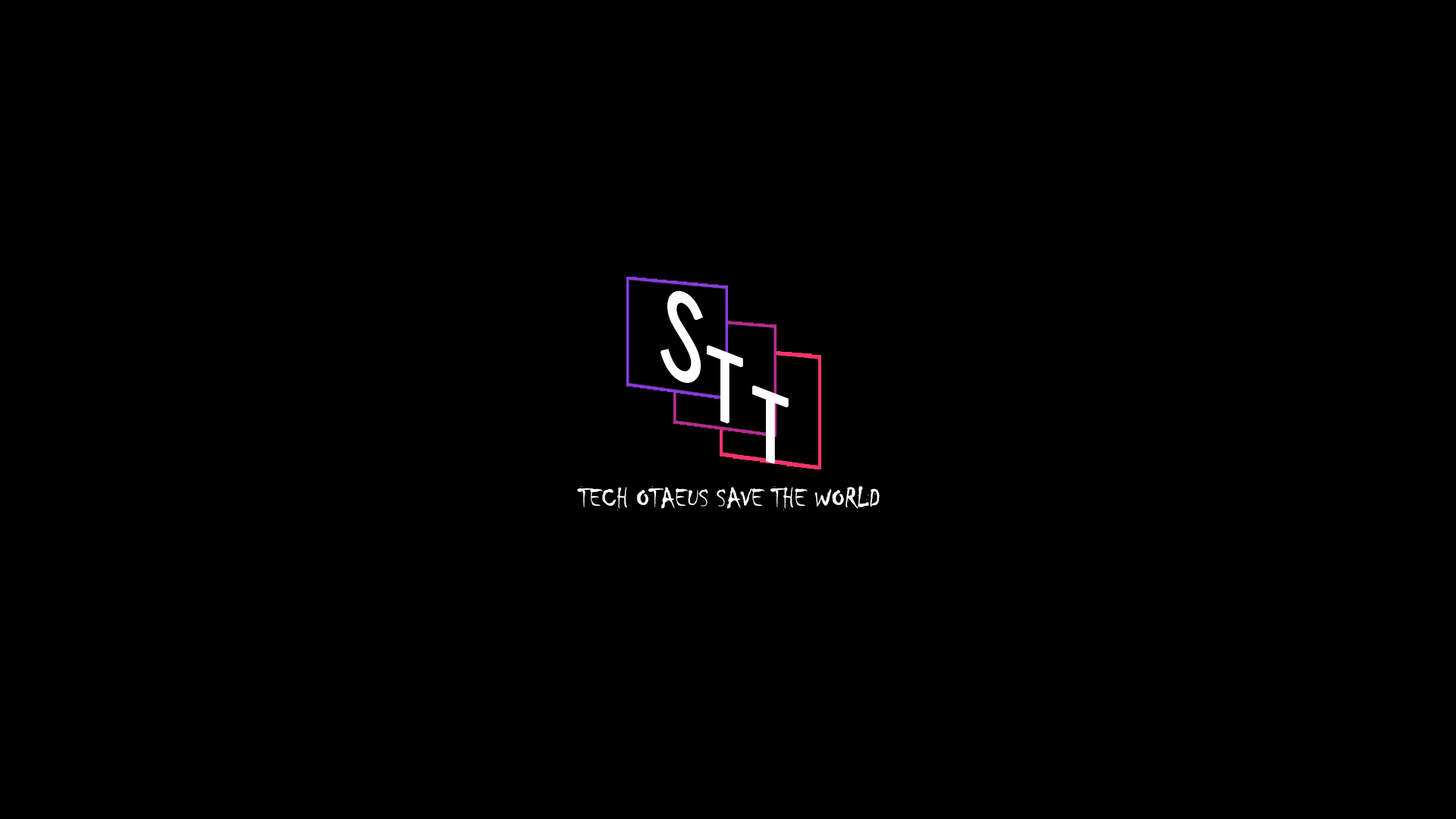
<style>
.page{position:relative;width:1456px;height:819px;background:#000000}
.page>*{position:absolute;margin:0}
.t1{font:28.4px "Chiller-Regular";color:#fefefe}
</style>
<div class="page">
<p class="t1" style="left:577px;top:486px;width:303px;height:24px">TECH OTAEUS SAVE THE WORLD</p>
</div>
